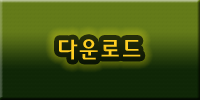
<style>
.page{position:relative;width:200px;height:100px}
.page>*{position:absolute;margin:0}
.t1{font:24px "2002L";letter-spacing:0.05em;color:#ffce21}
</style>
<div class="page">
<p class="t1" style="left:59px;top:39px;width:82px;height:21px">다운로드</p>
</div>
